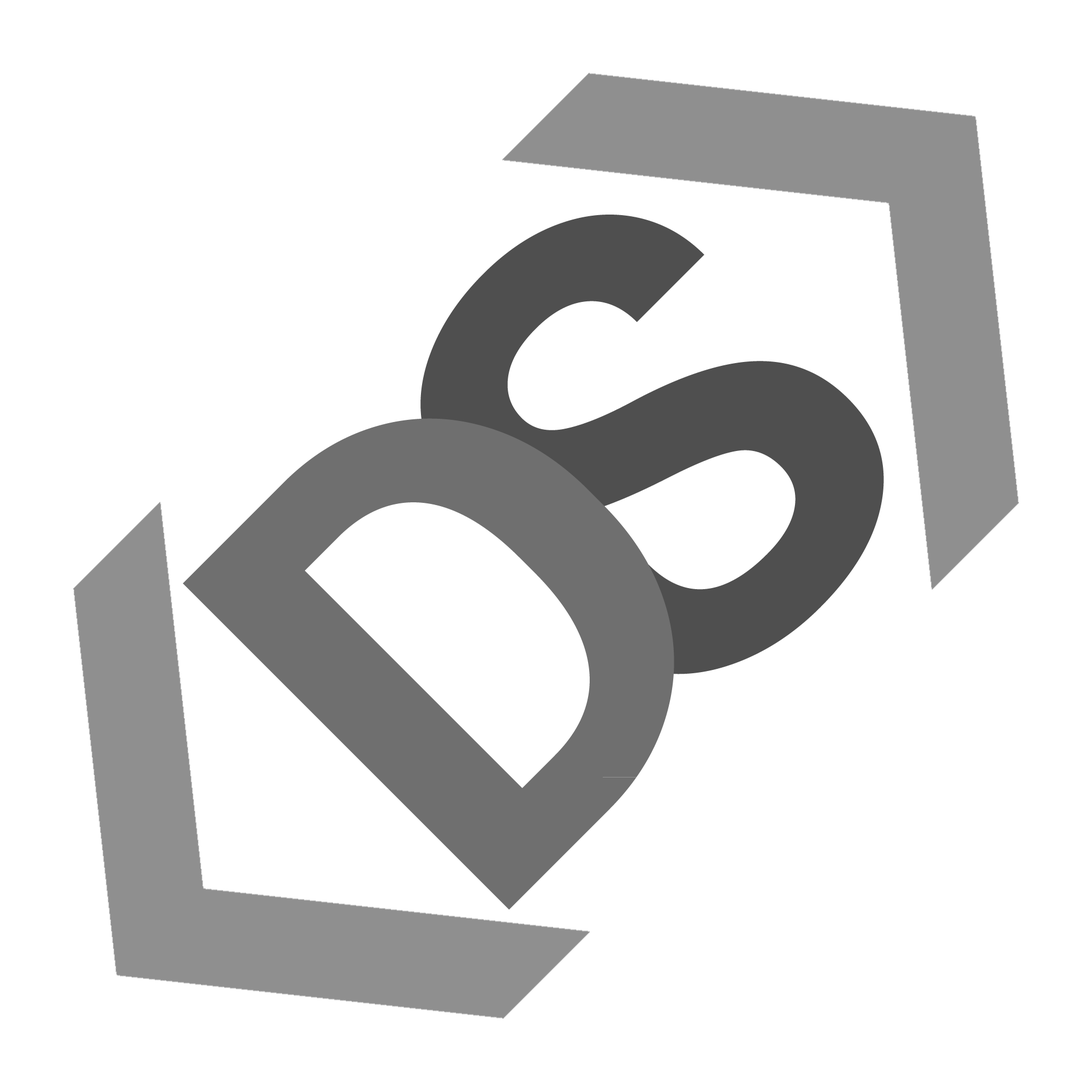
<style>
.page{position:relative;width:1092px;height:1092px;background:#ffffff}
.page>*{position:absolute;margin:0}
.t1{font:648.8px "Roboto-Bold";color:#4f4f4f}
.t2{font:648.8px "Roboto-Bold";color:#6f6f6f}
</style>
<div class="page">
<p class="t1" style="left:420px;top:215px;width:464px;height:459px;rotate:-45deg">S</p>
<p class="t2" style="left:183px;top:418px;width:491px;height:492px;rotate:-45deg">D</p>
</div>
